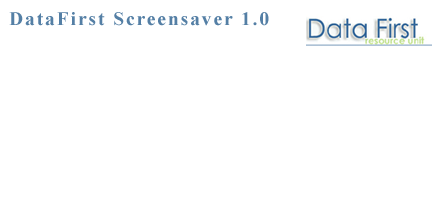
<style>
.page{position:relative;width:432px;height:208px;background:#ffffff}
.page>*{position:absolute;margin:0}
.t1{font:19.4px "TimesNewRomanPS-BoldMT";letter-spacing:0.1em;color:#547fa5}
</style>
<div class="page">
<p class="t1" style="left:9px;top:12px;width:260px;height:14px">DataFirst Screensaver 1.0</p>
</div>
